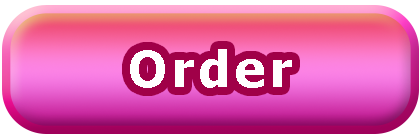
<style>
.page{position:relative;width:420px;height:135px}
.page>*{position:absolute;margin:0}
.t1{font:50px "Tahoma-Bold";letter-spacing:0.1em;color:#ffffff}
</style>
<div class="page">
<p class="t1" style="left:130px;top:49px;width:162px;height:39px">Order</p>
</div>
